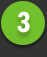
<style>
.page{position:relative;width:47px;height:57px;background:#72c02c}
.page>*{position:absolute;margin:0}
.t1{font:30px "FranklinGothic-DemiCond";color:#ffffff;scale:0.9 1}
</style>
<div class="page">
<p class="t1" style="left:17px;top:11px;width:13px;height:22px">3</p>
</div>
